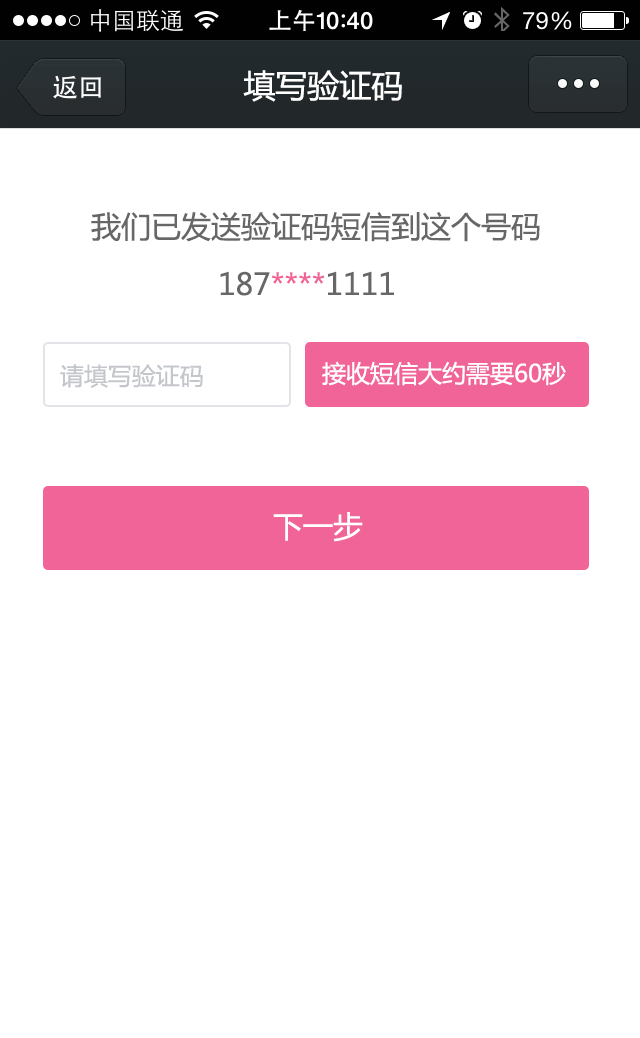
<style>
.page{position:relative;width:640px;height:1038px;background:#ffffff}
.page>*{position:absolute;margin:0}
.t1{font:32px "MicrosoftYaHei";color:#ffffff}
.t2{font:30px "MicrosoftYaHei";color:#676767}
.t3{font:30px "MicrosoftYaHei";color:#f16498}
.t4{font:24px "MicrosoftYaHei";color:#c3c6cb}
.t5{font:24px "MicrosoftYaHei";color:#ffffff}
.t6{font:30px "MicrosoftYaHei";color:#ffffff}
</style>
<div class="page">
<p class="t1" style="left:243px;top:70px;width:159px;height:32px">填写验证码</p>
<p class="t2" style="left:91px;top:212px;width:449px;height:30px">我们已发送验证码短信到这个号码</p>
<p class="t3" style="left:220px;top:271px;width:174px;height:25px"><span class="t2">187</span>****<span class="t2">1111</span></p>
<p class="t4" style="left:60px;top:364px;width:143px;height:24px">请填写验证码</p>
<p class="t5" style="left:322px;top:361px;width:244px;height:25px">接收短信大约需要60秒</p>
<p class="t6" style="left:273px;top:512px;width:90px;height:30px">下一步</p>
</div>
